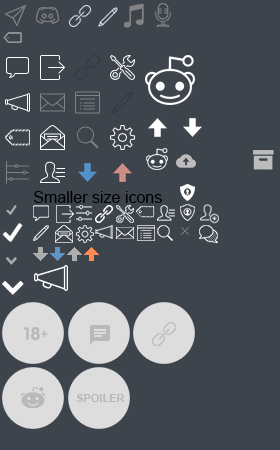
<style>
.page{position:relative;width:280px;height:450px;background:#3d444c}
.page>*{position:absolute;margin:0}
.t1{font:16px "ArialMT";color:#000000}
.t2{font:18px "VAG-Rounded-Bold";color:#b9b9b9}
.t3{font:12px "VAG-Rounded-Bold";color:#b9b9b9}
.t4{font:11px "Arial-BoldMT";color:#b9b9b9}
</style>
<div class="page">
<p class="t1" style="left:34px;top:191px;width:128px;height:12px">Smaller size icons</p>
<p class="t2" style="left:24px;top:327px;width:16px;height:14px">18</p>
<p class="t3" style="left:41px;top:330px;width:7px;height:7px">+</p>
<p class="t4" style="left:76px;top:394px;width:49px;height:8px">SPOILER</p>
</div>
